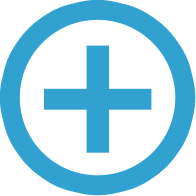
<style>
.page{position:relative;width:196px;height:196px;background:#ffffff}
.page>*{position:absolute;margin:0}
.t1{font:206.4px "HelveticaNeueCyr-Bold";letter-spacing:0.05em;color:#31a2d0}
</style>
<div class="page">
<p class="t1" style="left:44px;top:45px;width:108px;height:108px">+</p>
</div>
